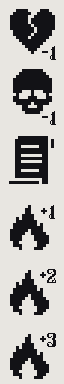
<style>
.page{position:relative;width:64px;height:384px;background:#e8e6e1}
.page>*{position:absolute;margin:0}
.t1{font:36px "DungeonFont";color:#121216}
.t2{font:24px "DungeonFont";color:#121216}
</style>
<div class="page">
<p class="t1" style="left:42px;top:46px;width:14px;height:14px">-<span class="t2">1</span></p>
<p class="t1" style="left:42px;top:111px;width:14px;height:14px">-<span class="t2">1</span></p>
<p class="t1" style="left:41px;top:205px;width:14px;height:14px">+<span class="t2">1</span></p>
<p class="t1" style="left:40px;top:269px;width:16px;height:14px">+<span class="t2">2</span></p>
<p class="t1" style="left:40px;top:333px;width:16px;height:14px">+<span class="t2">3</span></p>
</div>
